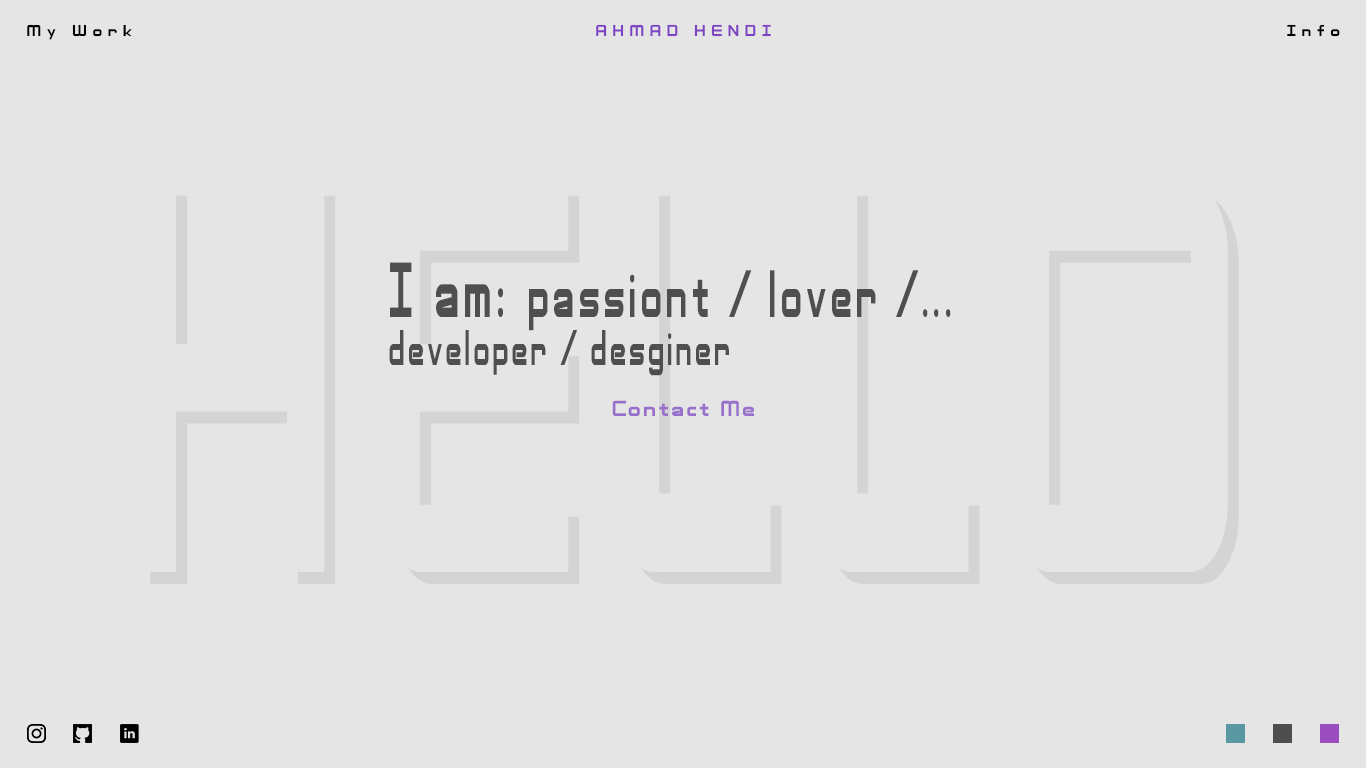
<style>
.page{position:relative;width:1366px;height:768px;background:#e5e5e5}
.page>*{position:absolute;margin:0}
.t1{font:16px "AdventureSubtitles";letter-spacing:0.36em;color:#000000}
.t2{font:16px "AdventureSubtitles";letter-spacing:0.36em;color:#7c43c3;text-transform:uppercase}
.t3{font:67.2px "AdventureSubtitles";letter-spacing:0.1em;color:#4f4f4f;scale:0.55 1}
.t4{font:78.4px "AdventureSubtitles";letter-spacing:0.1em;color:#4f4f4f;scale:0.55 1}
.t5{font:50.4px "AdventureSubtitles";letter-spacing:0.1em;color:#4f4f4f;scale:0.55 1}
.t6{font:22px "AdventureSubtitles";letter-spacing:0.1em;color:#9770cb}
</style>
<div class="page">
<p class="t1" style="left:27px;top:24px;width:105px;height:16px">My Work</p>
<p class="t2" style="left:596px;top:24px;width:175px;height:13px">ahmad hendi</p>
<p class="t1" style="left:1287px;top:24px;width:53px;height:13px">Info</p>
<p class="t3" style="left:390px;top:262px;width:561px;height:69px"><span class="t4">I am: </span>passiont / lover /...</p>
<p class="t5" style="left:389px;top:330px;width:340px;height:46px">developer / desginer</p>
<p class="t6" style="left:612px;top:400px;width:142px;height:16px">Contact Me</p>
</div>
